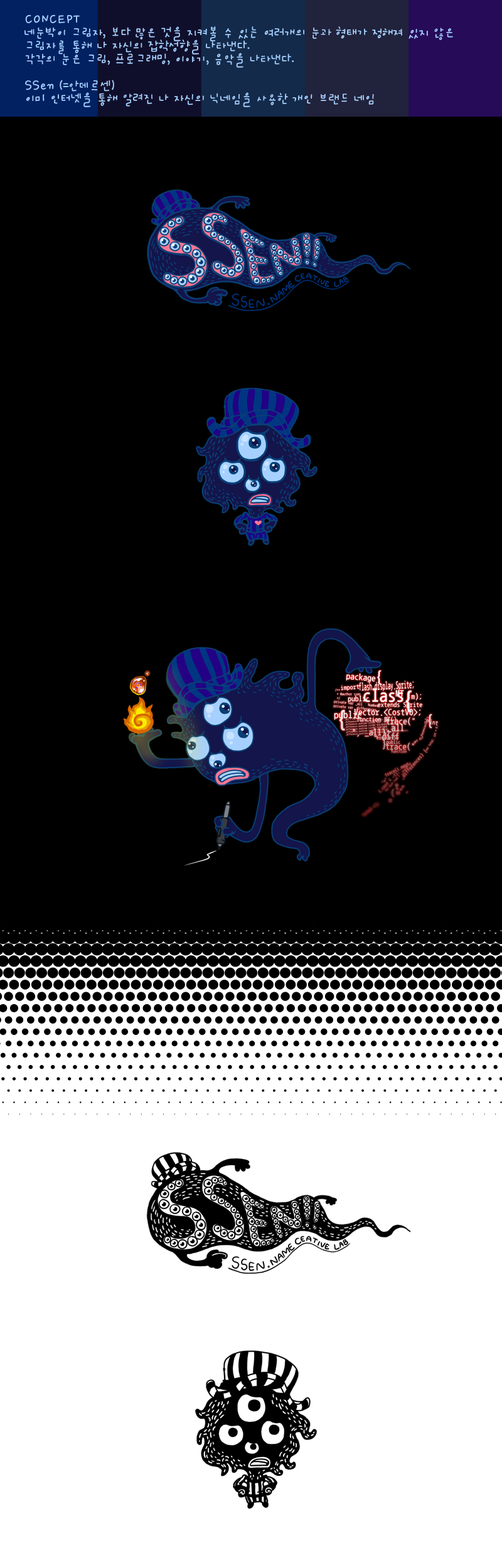
<style>
.page{position:relative;width:502px;height:1568px;background:#000000}
.page>*{position:absolute;margin:0}
.t1{font:15.1px/13.2px "SanKsM";color:#a5d0ff}
</style>
<div class="page">
<p class="t1" style="left:24px;top:14px;width:429px;height:93px">CONCEPT<br>네눈박이 그림자, 보다 많은 것을 지켜볼 수 있는 여러개의 눈과 형태가 정해져 있지 않은 그림자를 통해 나 자신의 잡학성향을 나타낸다.<br>각각의 눈은 그림, 프로그래밍, 이야기, 음악을 나타낸다.<br><br>SSen (=안데르센)<br>이미 인터넷을 통해 알려진 나 자신의 닉네임을 사용한 개인 브랜드 네임</p>
</div>
